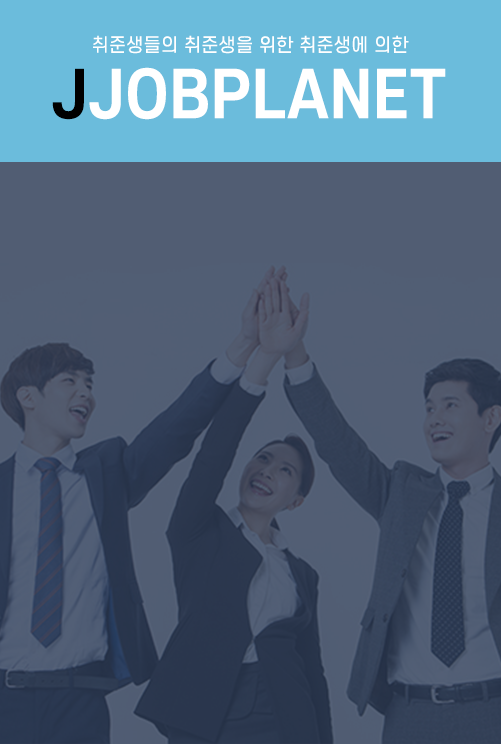
<style>
.page{position:relative;width:501px;height:744px}
.page>*{position:absolute;margin:0}
.t1{font:18.5px "S-CoreDream-4Regular";letter-spacing:0.02em;color:#ffffff;scale:0.96 1}
.t2{font:62.4px "S-CoreDream-6Bold";letter-spacing:0.02em;color:#ffffff;scale:0.96 1}
.t3{font:62.4px "S-CoreDream-6Bold";letter-spacing:0.02em;color:#000000;scale:0.96 1}
</style>
<div class="page">
<p class="t1" style="left:93px;top:35px;width:316px;height:19px">취준생들의 취준생을 위한 취준생에 의한</p>
<p class="t2" style="left:52px;top:67px;width:394px;height:53px"><span class="t3">J</span>JOBPLANET</p>
</div>
